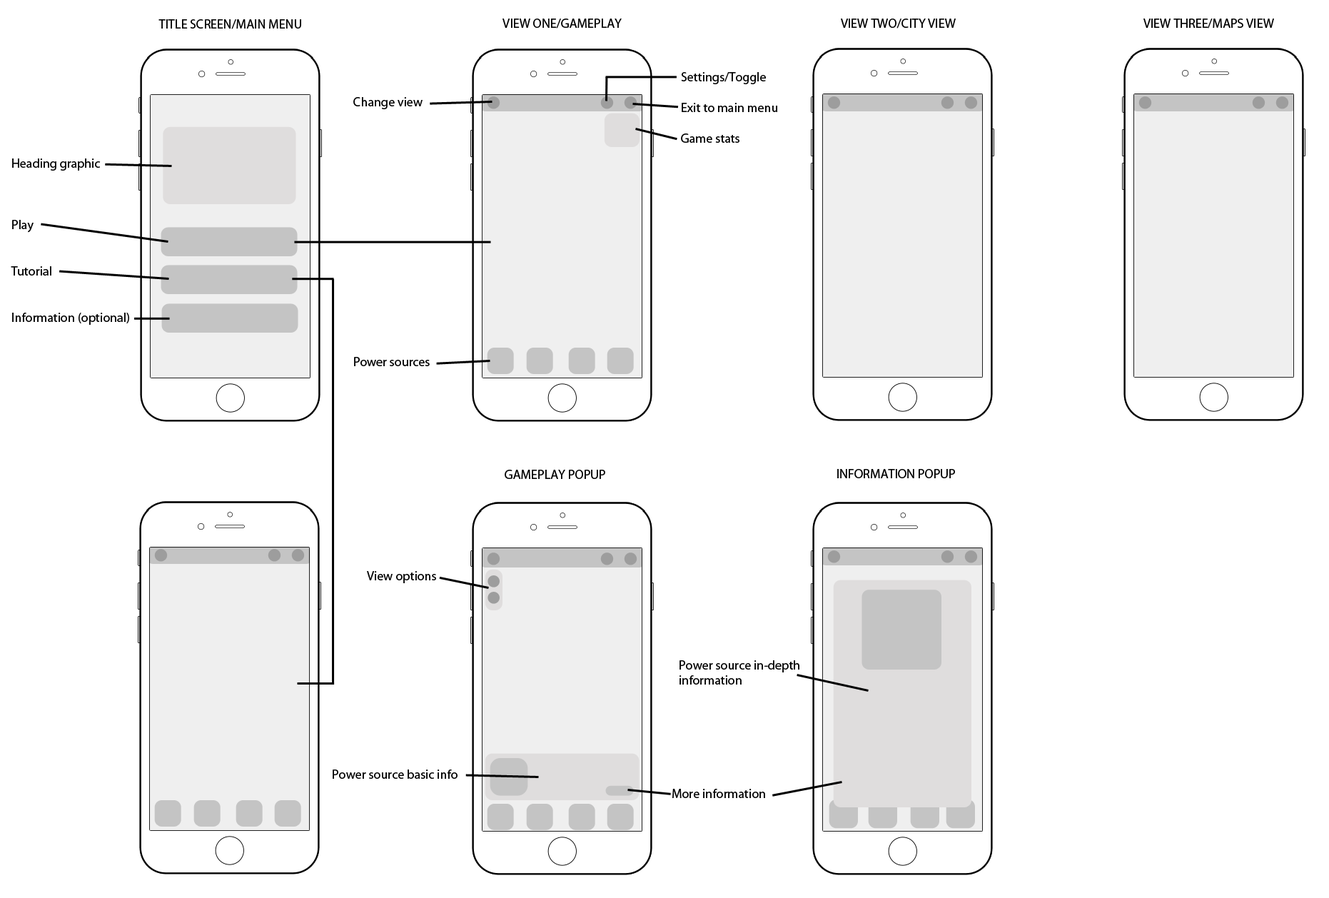
<style>
.page{position:relative;width:1329px;height:898px;background:#ffffff}
.page>*{position:absolute;margin:0}
.t1{font:12.8px "MyriadPro-Regular";color:#000000}
</style>
<div class="page">
<p class="t1" style="left:158px;top:19px;width:143px;height:10px">TITLE SCREEN/MAIN MENU</p>
<p class="t1" style="left:502px;top:19px;width:119px;height:10px">VIEW ONE/GAMEPLAY</p>
<p class="t1" style="left:840px;top:19px;width:115px;height:10px">VIEW TWO/CITY VIEW</p>
<p class="t1" style="left:1143px;top:19px;width:131px;height:10px">VIEW THREE/MAPS VIEW</p>
<p class="t1" style="left:681px;top:72px;width:96px;height:71px">Settings/Toggle<br><br>Exit to main menu<br><br>Game stats</p>
<p class="t1" style="left:353px;top:97px;width:69px;height:12px">Change view</p>
<p class="t1" style="left:11px;top:158px;width:118px;height:167px">Heading graphic<br><br><br><br>Play<br><br><br>Tutorial<br><br><br>Information (optional)</p>
<p class="t1" style="left:354px;top:357px;width:76px;height:9px">Power sources</p>
<p class="t1" style="left:504px;top:469px;width:101px;height:10px">GAMEPLAY POPUP</p>
<p class="t1" style="left:837px;top:469px;width:118px;height:9px">INFORMATION POPUP</p>
<p class="t1" style="left:367px;top:571px;width:69px;height:12px">View options</p>
<p class="t1" style="left:679px;top:660px;width:120px;height:24px">Power source in-depth information</p>
<p class="t1" style="left:332px;top:769px;width:125px;height:9px">Power source basic info</p>
<p class="t1" style="left:672px;top:788px;width:93px;height:10px">More information</p>
</div>
